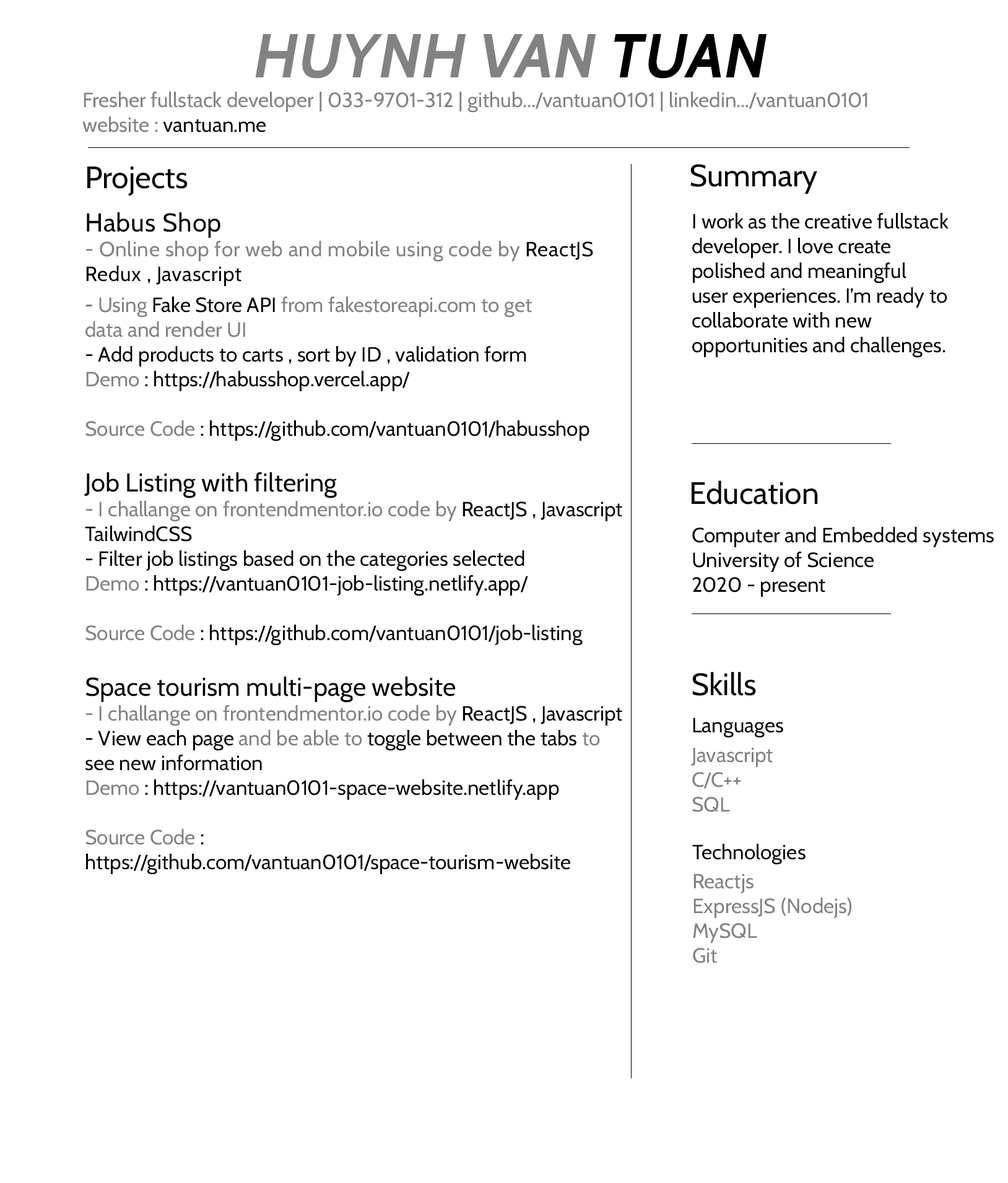
<style>
.page{position:relative;width:1008px;height:1183px;background:#ffffff}
.page>*{position:absolute;margin:0}
.t1{font:61.9px "Cabin-Bold";color:#828282;font-weight:bold}
.t2{font:61.9px "Cabin-Bold";color:#000000;font-weight:bold}
.t3{font:20.6px "Cabin-Regular";color:#828282;font-weight:bold}
.t4{font:20.6px "Cabin-Regular";color:#000000;font-weight:bold}
.t5{font:31px "Cabin-Regular";color:#000000;font-weight:bold}
.t6{font:20.6px "Cabin-Regular";color:#000000;font-style:italic}
.t7{font:25.8px "Cabin-Regular";letter-spacing:0.02em;color:#000000;font-weight:bold}
.t8{font:20.6px "Cabin-Regular";letter-spacing:0.02em;color:#828282;font-weight:bold}
.t9{font:20.6px "Cabin-Regular";letter-spacing:0.02em;color:#000000;font-weight:bold}
.t10{font:20.6px "Cabin-Bold";color:#828282;font-style:italic}
.t11{font:20.6px "Cabin-Regular";color:#828282;font-style:italic}
.t12{font:25.8px "Cabin-Regular";color:#000000;font-style:italic}
</style>
<div class="page">
<p class="t1" style="left:255px;top:34px;width:512px;height:45px">HUYNH VAN <span class="t2">TUAN</span></p>
<p class="t3" style="left:82px;top:92px;width:785px;height:40px">Fresher fullstack developer | 033-9701-312 | github.../vantuan0101 | linkedin.../vantuan0101<br>website : <span class="t4">vantuan.me</span></p>
<p class="t5" style="left:87px;top:167px;width:101px;height:29px">Projects</p>
<p class="t5" style="left:690px;top:164px;width:127px;height:30px">Summary</p>
<p class="t6" style="left:84px;top:212px;width:538px;height:663px"><span class="t7">Habus Shop<br></span><span class="t8">- Online shop for web and mobile using code by</span><span class="t9"> ReactJS<br>Redux , Javascript<br><br></span><span class="t10">- </span><span class="t11">Using </span>Fake Store API <span class="t11">from fakestoreapi.com to get<br>data and render UI<br></span>- Add products to carts , sort by ID , validation form<br><span class="t11">Demo</span> : https://habusshop.vercel.app/<br><br><span class="t11">Source Code</span> : https://github.com/vantuan0101/habusshop<br><br><span class="t12">Job Listing with filtering<br></span><span class="t11">- I challange on frontendmentor.io code by</span> ReactJS , Javascript<br>TailwindCSS<br>- Filter job listings based on the categories selected<br><span class="t11">Demo</span> : https://vantuan0101-job-listing.netlify.app/<br><br><span class="t11">Source Code</span> : https://github.com/vantuan0101/job-listing<br><br><span class="t12">Space tourism multi-page website<br></span><span class="t11">- I challange on frontendmentor.io code by </span>ReactJS , Javascript<br>- View each page <span class="t11">and be able to</span> toggle between the tabs <span class="t11">to <br></span>see new information<br><span class="t11">Demo </span>: https://vantuan0101-space-website.netlify.app<br><br><span class="t11">Source Code</span> : <br>https://github.com/vantuan0101/space-tourism-website</p>
<p class="t4" style="left:692px;top:213px;width:256px;height:145px">I work as the creative fullstack<br>developer. I love create <br>polished and meaningful <br>user experiences. I’m ready to <br>collaborate with new<br>opportunities and challenges.</p>
<p class="t5" style="left:692px;top:480px;width:126px;height:25px">Education</p>
<p class="t4" style="left:692px;top:527px;width:302px;height:70px">Computer and Embedded systems<br>University of Science<br>2020 - present</p>
<p class="t5" style="left:692px;top:672px;width:64px;height:24px">Skills</p>
<p class="t4" style="left:693px;top:718px;width:90px;height:20px">Languages</p>
<p class="t3" style="left:691px;top:747px;width:82px;height:65px">Javascript<br>C/C++<br>SQL</p>
<p class="t4" style="left:692px;top:844px;width:113px;height:21px">Technologies</p>
<p class="t3" style="left:693px;top:874px;width:158px;height:89px">Reactjs<br>ExpressJS (Nodejs)<br>MySQL<br>Git</p>
</div>
